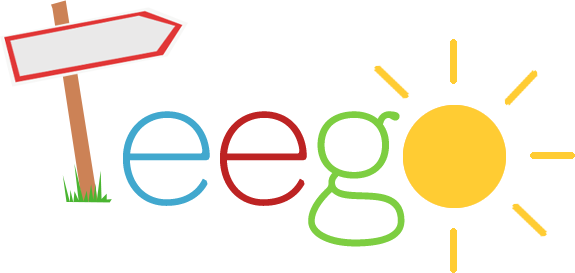
<style>
.page{position:relative;width:575px;height:273px;background:#ffffff}
.page>*{position:absolute;margin:0}
.t1{font:170.8px "Znikomit";color:#41a8ce;font-weight:bold}
.t2{font:170.8px "Znikomit";color:#bd2323;font-weight:bold}
.t3{font:170.8px "Znikomit";color:#7dce41;font-weight:bold}
</style>
<div class="page">
<p class="t1" style="left:123px;top:111px;width:282px;height:136px">e<span class="t2">e</span><span class="t3">g</span></p>
</div>
